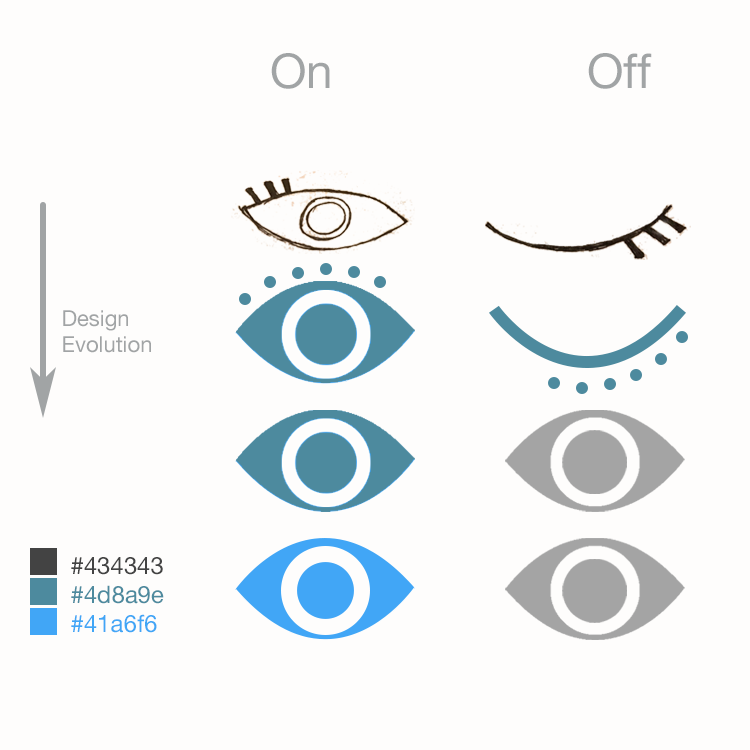
<style>
.page{position:relative;width:750px;height:750px;background:#fefdfc}
.page>*{position:absolute;margin:0}
.t1{font:48px "HelveticaNeue";color:#a1a4a5}
.t2{font:22px "HelveticaNeue";color:#a1a4a5}
.t3{font:24px "HelveticaNeue";color:#434343}
.t4{font:24px "HelveticaNeue";color:#4d8a9e}
.t5{font:24px "HelveticaNeue";color:#41a6f6}
</style>
<div class="page">
<p class="t1" style="left:271px;top:53px;width:381px;height:36px">On                   Off</p>
<p class="t2" style="left:63px;top:310px;width:88px;height:43px">Design<br>Evolution</p>
<p class="t3" style="left:71px;top:557px;width:93px;height:76px">#434343<br><span class="t4">#4d8a9e<br></span><span class="t5">#41a6f6</span></p>
</div>
